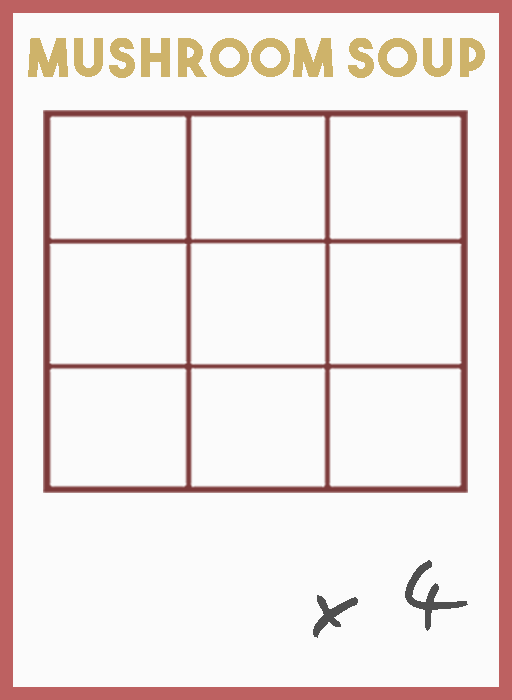
<style>
.page{position:relative;width:512px;height:700px;background:#fbfbfb}
.page>*{position:absolute;margin:0}
.t1{font:52.9px "TheBoldFont";letter-spacing:0.05em;color:#ceb36a}
.t2{font:106.1px "EasySpeech";letter-spacing:0.05em;color:#4f4f4f}
</style>
<div class="page">
<p class="t1" style="left:28px;top:38px;width:457px;height:40px">mushroom soup</p>
<p class="t2" style="left:313px;top:560px;width:155px;height:78px">x 4</p>
</div>
